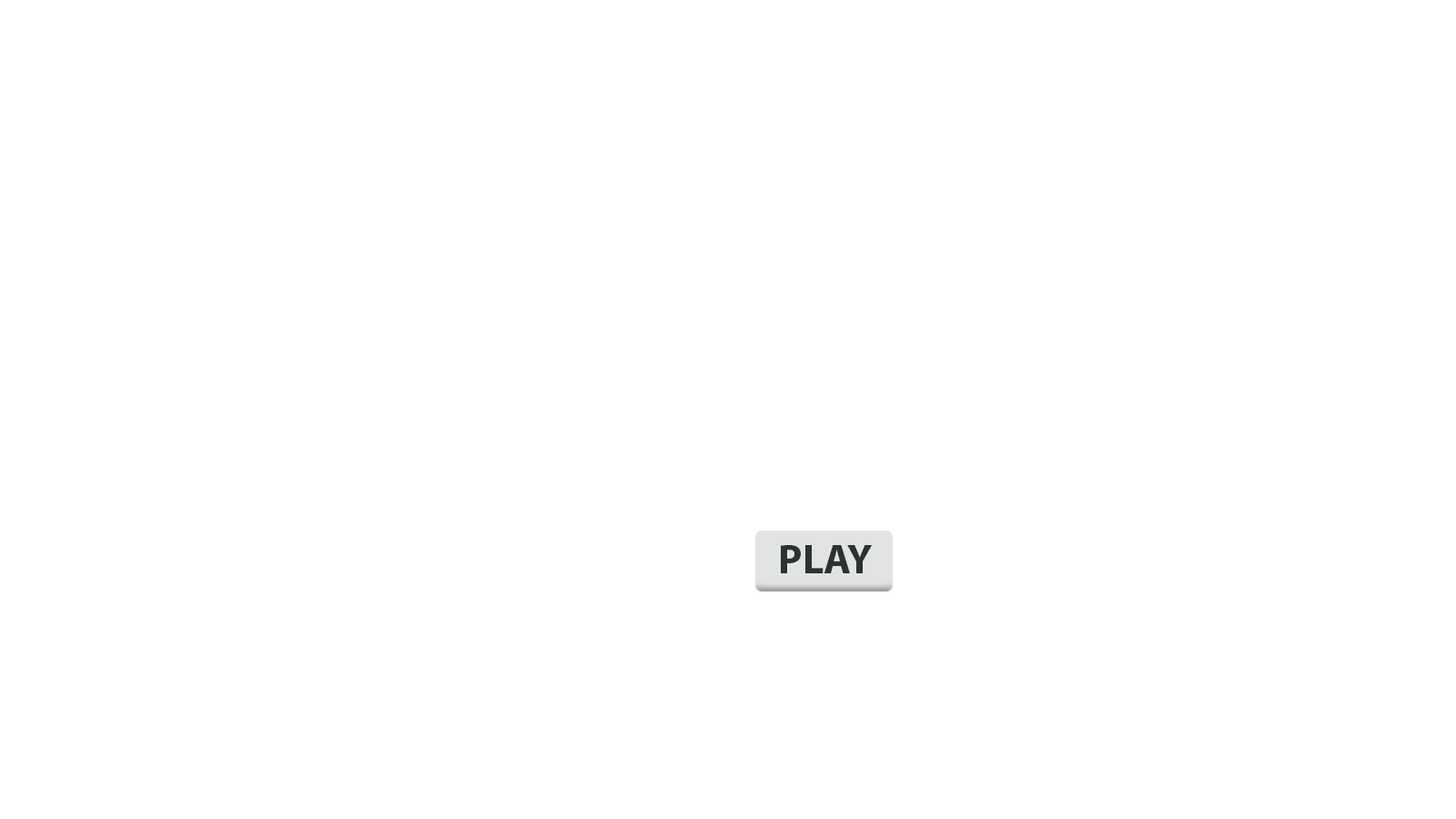
<style>
.page{position:relative;width:1456px;height:819px;background:#ffffff}
.page>*{position:absolute;margin:0}
.t1{font:41.7px "MyriadPro-Bold";color:#2e3132}
</style>
<div class="page">
<p class="t1" style="left:781px;top:545px;width:92px;height:28px">PLAY</p>
</div>
